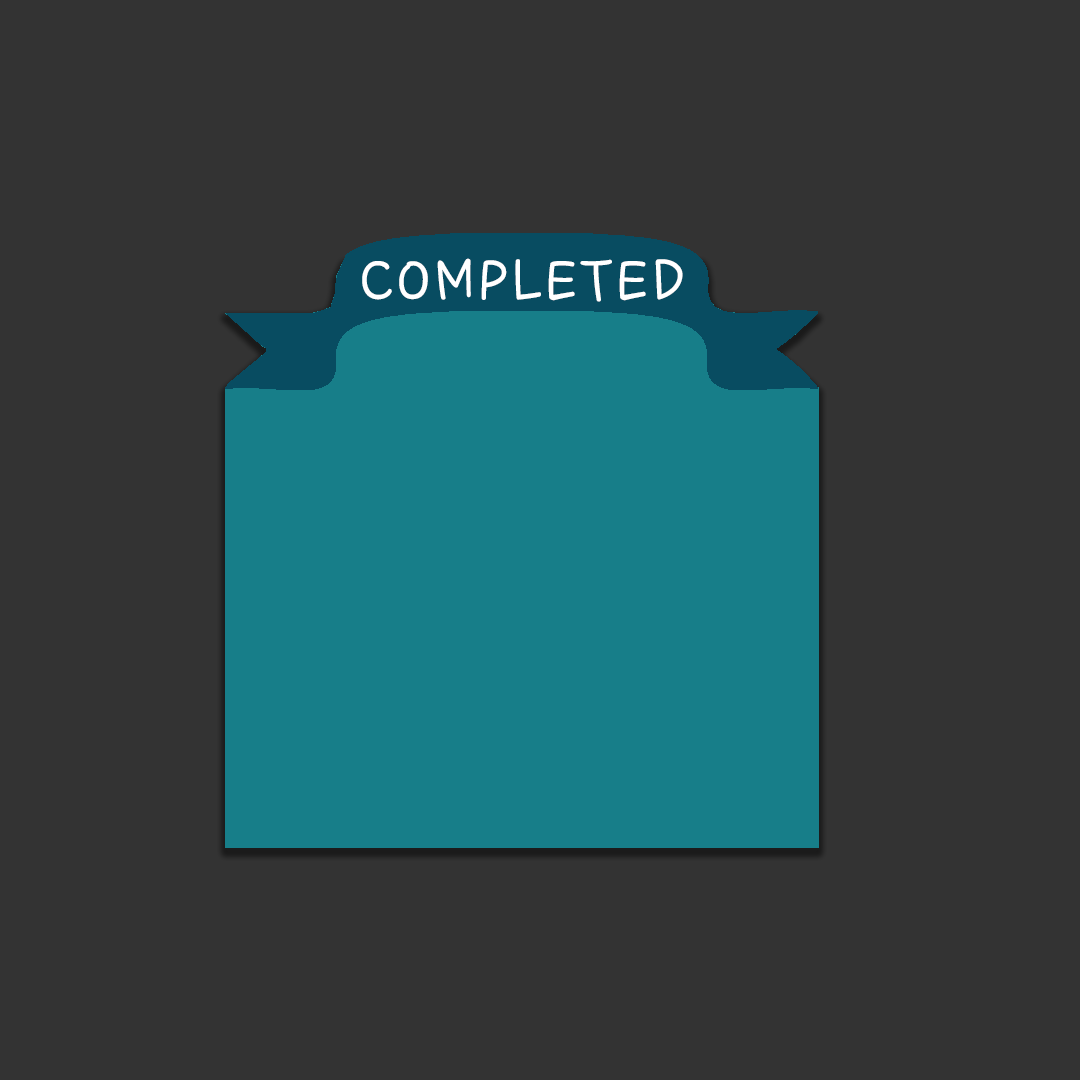
<style>
.page{position:relative;width:1080px;height:1080px;background:#333333}
.page>*{position:absolute;margin:0}
.t1{font:58.3px "Chococooky";letter-spacing:0.06em;color:#ffffff}
</style>
<div class="page">
<p class="t1" style="left:362px;top:258px;width:321px;height:44px">COMPLETED</p>
</div>
